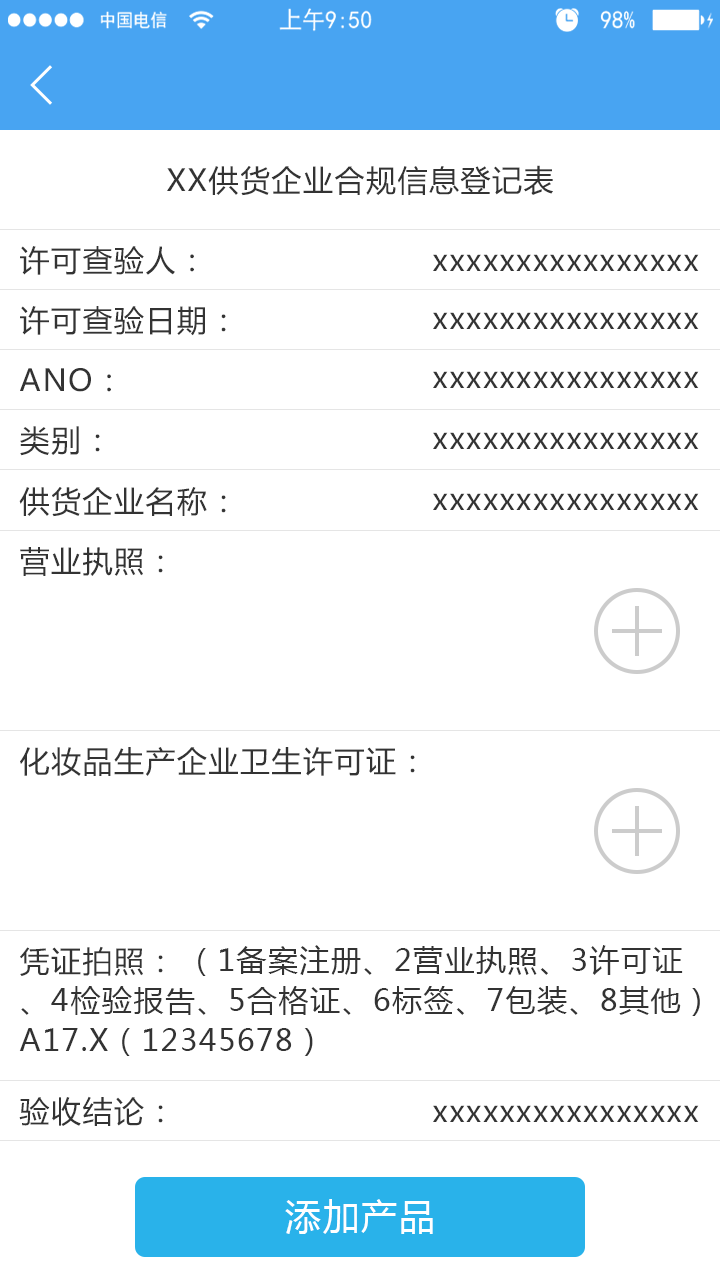
<style>
.page{position:relative;width:720px;height:1280px;background:#ffffff}
.page>*{position:absolute;margin:0}
.t1{font:30px "MicrosoftYaHei";letter-spacing:0.05em;color:#333333}
.t2{font:30px/40px "MicrosoftYaHei";letter-spacing:0.05em;color:#333333}
.t3{font:36px "MicrosoftYaHei";letter-spacing:0.05em;color:#ffffff}
</style>
<div class="page">
<p class="t1" style="left:167px;top:165px;width:386px;height:31px">XX供货企业合规信息登记表</p>
<p class="t1" style="left:20px;top:246px;width:174px;height:29px">许可查验人：</p>
<p class="t1" style="left:433px;top:254px;width:266px;height:17px">xxxxxxxxxxxxxxxx</p>
<p class="t1" style="left:20px;top:306px;width:206px;height:30px">许可查验日期：</p>
<p class="t1" style="left:433px;top:312px;width:266px;height:17px">xxxxxxxxxxxxxxxx</p>
<p class="t1" style="left:20px;top:368px;width:91px;height:24px">ANO：</p>
<p class="t1" style="left:433px;top:371px;width:266px;height:17px">xxxxxxxxxxxxxxxx</p>
<p class="t1" style="left:20px;top:426px;width:80px;height:30px">类别：</p>
<p class="t1" style="left:433px;top:432px;width:266px;height:17px">xxxxxxxxxxxxxxxx</p>
<p class="t1" style="left:19px;top:487px;width:207px;height:30px">供货企业名称：</p>
<p class="t1" style="left:433px;top:493px;width:266px;height:17px">xxxxxxxxxxxxxxxx</p>
<p class="t1" style="left:20px;top:547px;width:143px;height:29px">营业执照：</p>
<p class="t1" style="left:20px;top:747px;width:395px;height:29px">化妆品生产企业卫生许可证：</p>
<p class="t2" style="left:19px;top:945px;width:681px;height:111px">（1备案注册、2营业执照、3许可证、4检验报告、5合格证、6标签、7包装、8其他）A17.X（12345678）</p>
<p class="t1" style="left:20px;top:946px;width:143px;height:30px">凭证拍照：</p>
<p class="t1" style="left:19px;top:1096px;width:144px;height:30px">验收结论：</p>
<p class="t1" style="left:433px;top:1105px;width:266px;height:17px">xxxxxxxxxxxxxxxx</p>
<p class="t3" style="left:285px;top:1199px;width:148px;height:35px">添加产品</p>
</div>
